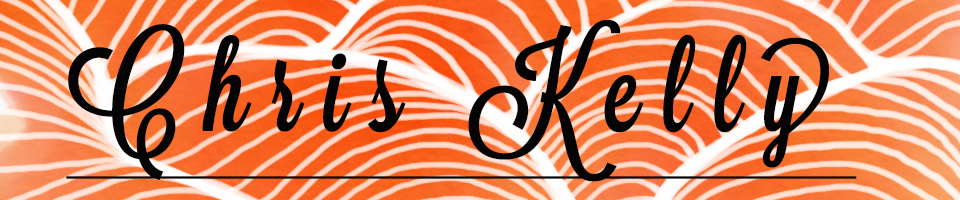
<style>
.page{position:relative;width:960px;height:200px}
.page>*{position:absolute;margin:0}
.t1{font:120px "Lavanderia-Sturdy";letter-spacing:0.2em;color:#040404;text-decoration:underline}
</style>
<div class="page">
<p class="t1" style="left:66px;top:19px;width:791px;height:163px">Chris Kelly</p>
</div>
